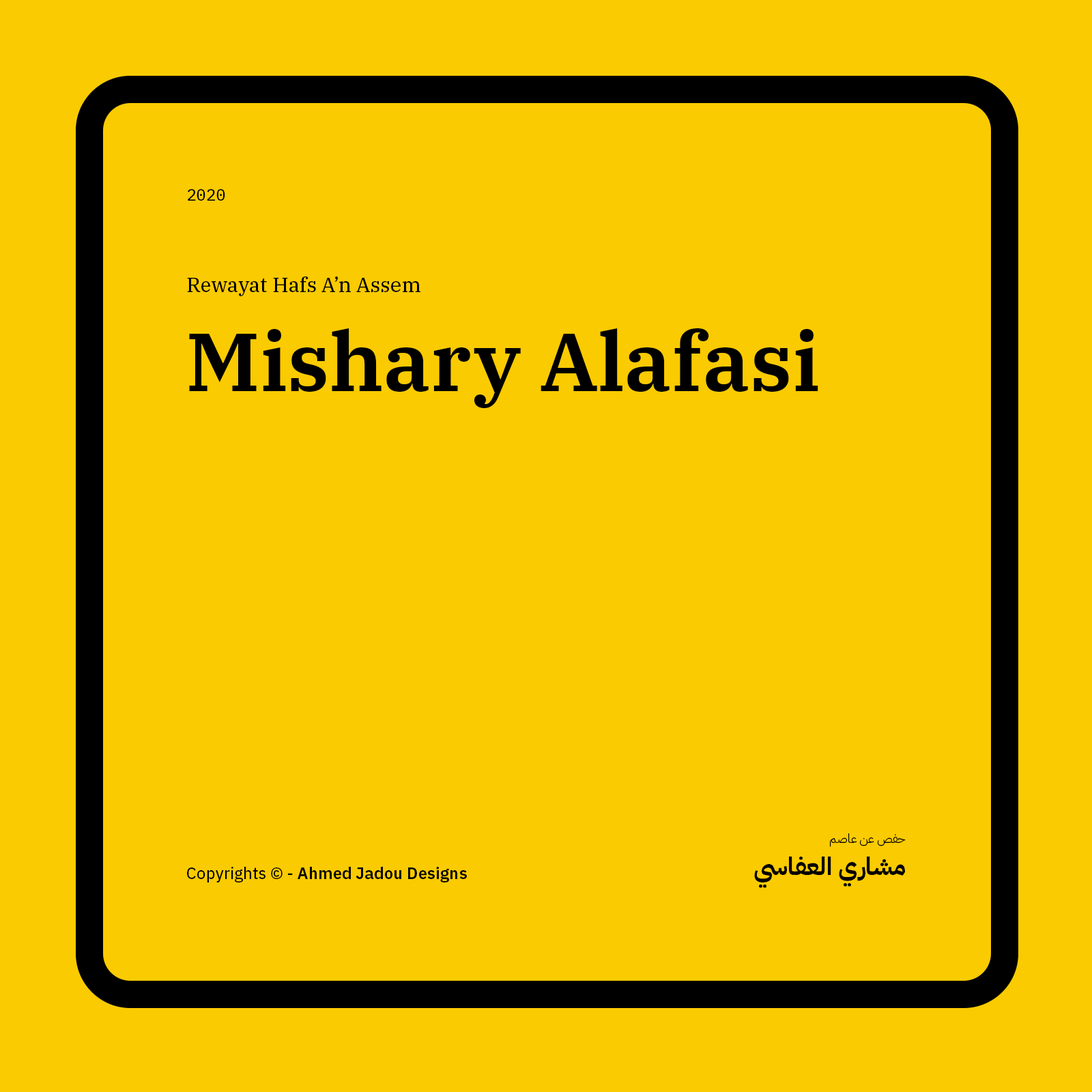
<style>
.page{position:relative;width:1092px;height:1092px;background:#facb00}
.page>*{position:absolute;margin:0}
.t1{font:16.4px "IBMPlexMono-Text";color:#000000}
.t2{font:20.5px "IBMPlexSerif-Text";color:#000000}
.t3{font:81.9px "IBMPlexSerif-SemiBold";color:#000000}
.t4{font:12.3px "IBMPlexArabic-Light";color:#000000}
.t5{font:24.6px "IBMPlexArabic-Bold";color:#000000}
.t6{font:16.4px "IBMPlexSans-SemiBold";color:#000000}
.t7{font:16.4px "IBMPlexSans-Text";color:#000000}
</style>
<div class="page">
<p class="t1" style="left:188px;top:189px;width:37px;height:12px">2020</p>
<p class="t2" style="left:187px;top:276px;width:233px;height:20px">Rewayat Hafs A’n Assem</p>
<p class="t3" style="left:189px;top:328px;width:629px;height:80px">Mishary Alafasi</p>
<p class="t4" style="left:830px;top:833px;width:76px;height:14px">حفص عن عاصم</p>
<p class="t5" style="left:754px;top:857px;width:151px;height:31px">مشاري العفاسي</p>
<p class="t6" style="left:187px;top:867px;width:280px;height:15px"><span class="t7">Copyrights © - </span>Ahmed Jadou Designs</p>
</div>
